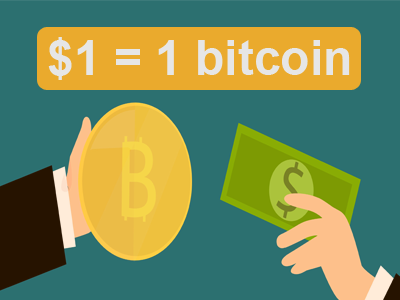
<style>
.page{position:relative;width:400px;height:300px;background:#2c7070}
.page>*{position:absolute;margin:0}
.t1{font:48px "Arial-BoldMT";color:#e6e6e6}
</style>
<div class="page">
<p class="t1" style="left:48px;top:37px;width:302px;height:43px">$1 = 1 bitcoin</p>
</div>
